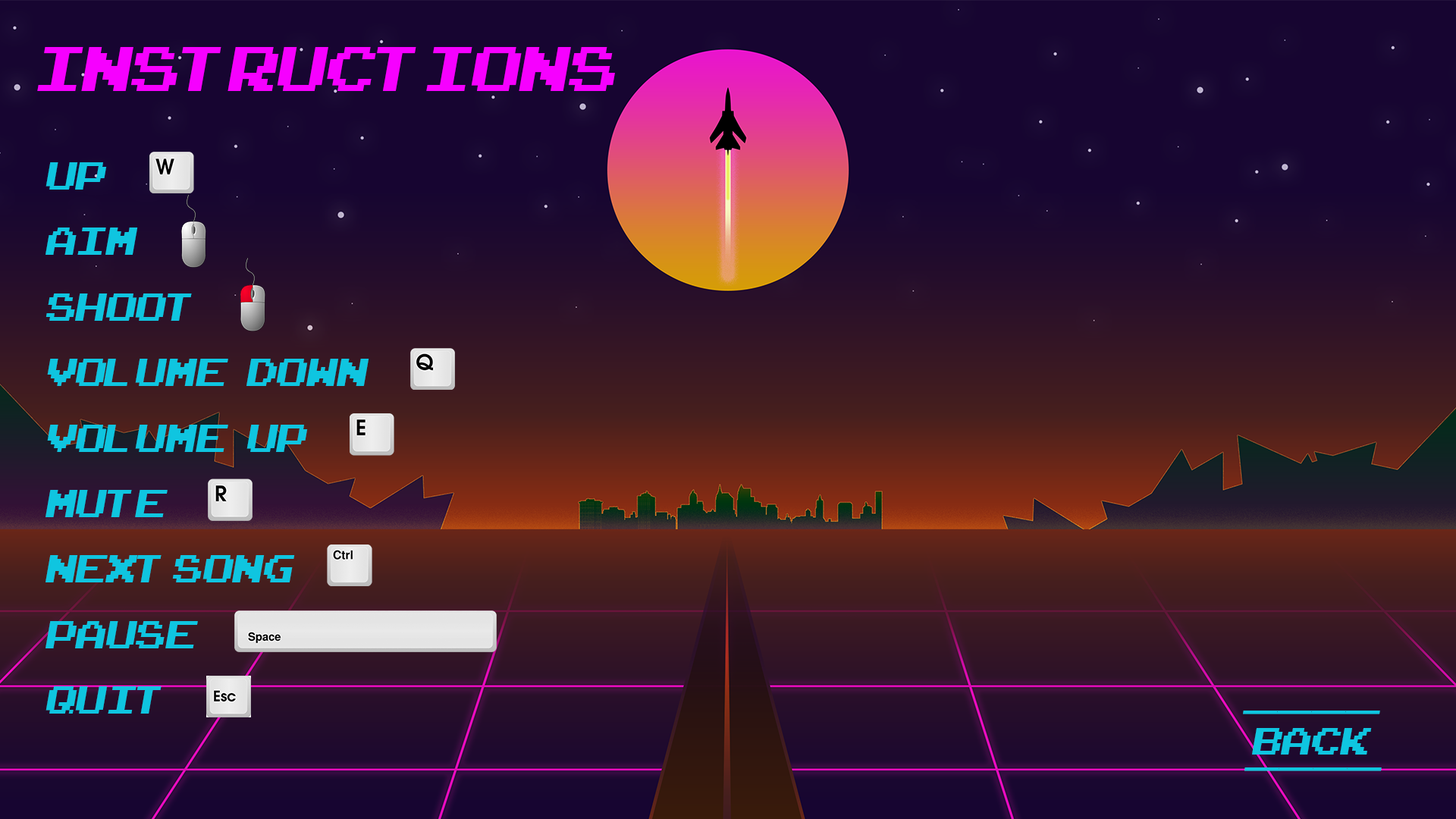
<style>
.page{position:relative;width:1456px;height:819px}
.page>*{position:absolute;margin:0}
.t1{font:88.4px "ArcadeClassic";color:#f600ff;font-style:italic}
.t2{font:54.6px "ArcadeClassic";color:#0fc5e0;font-style:italic}
.t3{font:68.2px "MyriadPro-Regular";color:#0fc5e0;font-style:italic}
.t4{font:53.4px "ArcadeClassic";color:#0fc5e0;font-style:italic}
</style>
<div class="page">
<p class="t1" style="left:37px;top:47px;width:578px;height:44px">instructions</p>
<p class="t2" style="left:45px;top:162px;width:324px;height:552px">uP <br>AIM <br>shoot<br>Volume   down<br>volume   up<br>mute<br>next song<br>pause<br>quit</p>
<p class="t3" style="left:1243px;top:711px;width:137px;height:3px">____</p>
<p class="t4" style="left:1252px;top:728px;width:120px;height:27px">back</p>
<p class="t3" style="left:1244px;top:767px;width:138px;height:4px">____</p>
</div>
